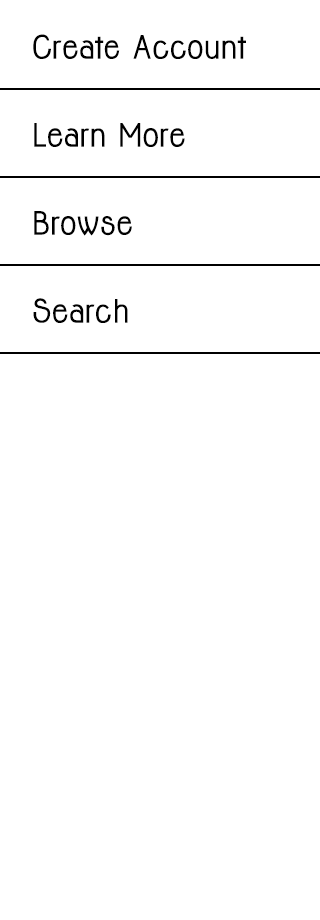
<style>
.page{position:relative;width:320px;height:920px;background:#ffffff}
.page>*{position:absolute;margin:0}
.t1{font:29.8px "Jolly-Bold";color:#000000}
</style>
<div class="page">
<p class="t1" style="left:33px;top:34px;width:213px;height:25px">Create Account</p>
<p class="t1" style="left:34px;top:123px;width:151px;height:24px">Learn More</p>
<p class="t1" style="left:34px;top:211px;width:98px;height:25px">Browse</p>
<p class="t1" style="left:33px;top:298px;width:95px;height:25px">Search</p>
</div>
